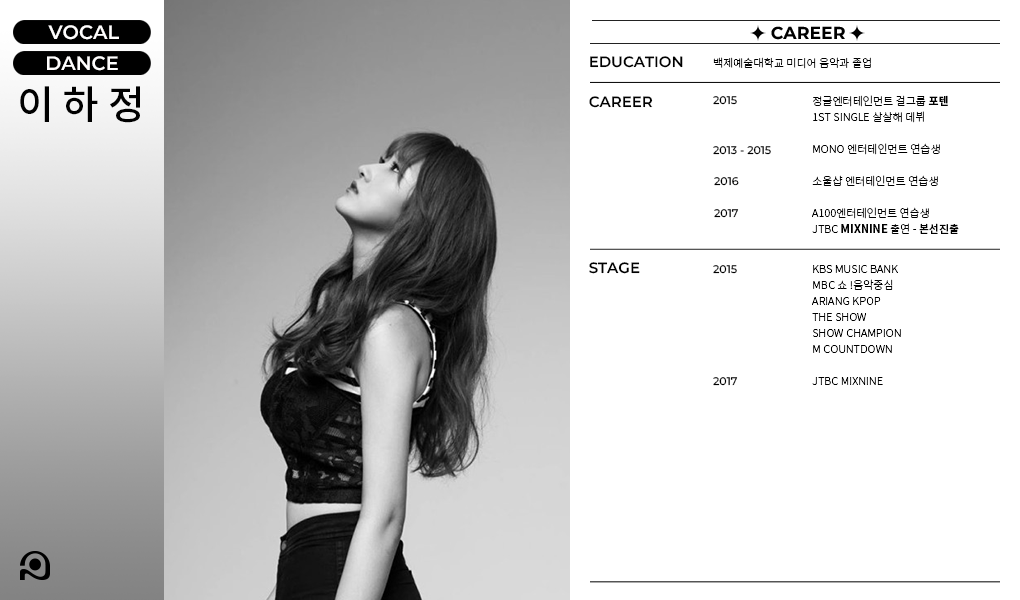
<style>
.page{position:relative;width:1020px;height:600px;background:#ffffff}
.page>*{position:absolute;margin:0}
.t1{font:19.4px "Montserrat-SemiBold";color:#fffefe}
.t2{font:17.3px "Montserrat-Bold";color:#000000}
.t3{font:15px "Montserrat-SemiBold";color:#000000}
.t4{font:11px "NotoSansKR-Light";color:#000000}
.t5{font:39.9px "NotoSansKR-Medium";color:#000000}
.t6{font:11px "Montserrat-Medium";color:#000000}
.t7{font:11px/16px "NotoSansKR-Light";color:#000000}
.t8{font:11px/16px "NotoSansKR-Bold";color:#000000}
.t9{font:11px/16px "NotoSansKR-Medium";color:#000000}
</style>
<div class="page">
<p class="t1" style="left:48px;top:25px;width:71px;height:15px">VOCAL</p>
<p class="t2" style="left:771px;top:26px;width:74px;height:14px">CAREER</p>
<p class="t1" style="left:47px;top:56px;width:71px;height:15px">DANCE</p>
<p class="t3" style="left:590px;top:56px;width:93px;height:12px">EDUCATION</p>
<p class="t4" style="left:713px;top:57px;width:158px;height:12px">백제예술대학교 미디어 음악과 졸업</p>
<p class="t5" style="left:20px;top:86px;width:120px;height:37px">이 하 정</p>
<p class="t3" style="left:589px;top:96px;width:64px;height:12px">CAREER</p>
<p class="t6" style="left:713px;top:96px;width:24px;height:9px">2015</p>
<p class="t7" style="left:812px;top:95px;width:147px;height:139px">정글엔터테인먼트 걸그룹 <span class="t8">포텐 <br></span>1ST SINGLE 살살해 데뷔<br><br>MONO 엔터테인먼트 연습생<br><br>소울샵 엔터테인먼트 연습생<br><br>A100엔터테인먼트 연습생<br>JTBC <span class="t8">MIXNINE</span> 출연 - <span class="t9">본선진출</span></p>
<p class="t6" style="left:713px;top:146px;width:58px;height:9px">2013 - 2015</p>
<p class="t6" style="left:714px;top:177px;width:25px;height:9px">2016</p>
<p class="t6" style="left:714px;top:209px;width:25px;height:9px">2017</p>
<p class="t3" style="left:589px;top:262px;width:51px;height:12px">STAGE</p>
<p class="t6" style="left:713px;top:265px;width:24px;height:9px">2015</p>
<p class="t7" style="left:812px;top:265px;width:89px;height:120px">KBS MUSIC BANK<br>MBC 쇼 !음악중심<br>ARIANG KPOP<br>THE SHOW<br>SHOW CHAMPION<br>M COUNTDOWN<br><br>JTBC MIXNINE</p>
<p class="t6" style="left:713px;top:377px;width:25px;height:9px">2017</p>
</div>
